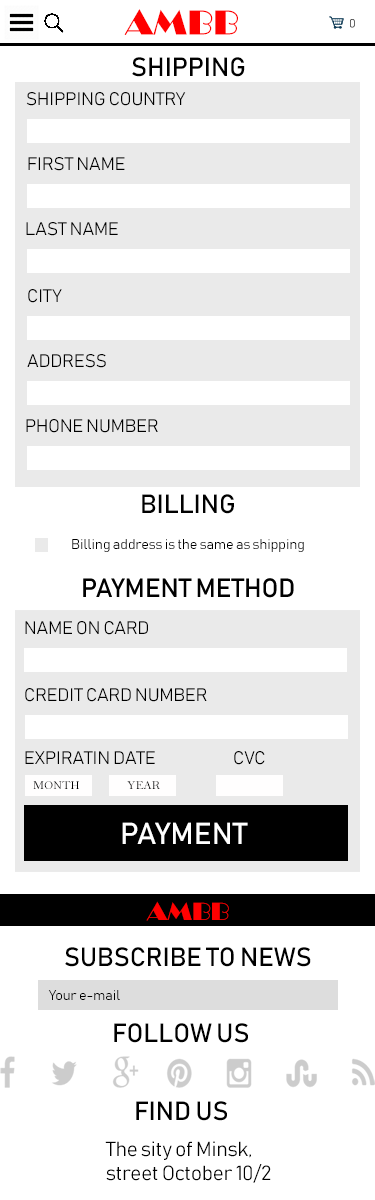
<style>
.page{position:relative;width:375px;height:1200px;background:#ffffff}
.page>*{position:absolute;margin:0}
.t1{font:36px "Broadway";color:#ff0000}
.t2{font:12px "Bahnschrift"}
.t3{font:26px "Bahnschrift";color:#000000}
.t4{font:18px "Bahnschrift";color:#000000}
.t5{font:14px "Bahnschrift";color:#000000}
.t6{font:12px "BellMT";color:#000000}
.t7{font:30px "Bahnschrift";color:#ffffff}
.t8{font:26px "Broadway";color:#ff0000}
.t9{font:20px "Bahnschrift";color:#000000}
</style>
<div class="page">
<p class="t1" style="left:124px;top:9px;width:114px;height:26px">AMBB</p>
<p class="t2" style="left:350px;top:19px;width:5px;height:9px">0</p>
<p class="t3" style="left:132px;top:57px;width:113px;height:20px">SHIPPING</p>
<p class="t4" style="left:26px;top:92px;width:160px;height:14px">SHIPPING COUNTRY</p>
<p class="t4" style="left:28px;top:157px;width:97px;height:14px">FIRST NAME</p>
<p class="t4" style="left:26px;top:222px;width:92px;height:14px">LAST NAME</p>
<p class="t4" style="left:28px;top:289px;width:34px;height:14px">CITY</p>
<p class="t4" style="left:27px;top:354px;width:79px;height:14px">ADDRESS</p>
<p class="t4" style="left:26px;top:419px;width:132px;height:14px">PHONE NUMBER</p>
<p class="t3" style="left:142px;top:494px;width:92px;height:20px">BILLING</p>
<p class="t5" style="left:72px;top:539px;width:232px;height:13px">Billing address is the same as shipping</p>
<p class="t4" style="left:25px;top:621px;width:123px;height:14px">NAME ON CARD</p>
<p class="t4" style="left:25px;top:688px;width:182px;height:14px">CREDIT CARD NUMBER</p>
<p class="t4" style="left:25px;top:751px;width:130px;height:13px">EXPIRATIN DATE</p>
<p class="t4" style="left:234px;top:751px;width:31px;height:14px">CVC</p>
<p class="t6" style="left:33px;top:781px;width:46px;height:8px">MONTH</p>
<p class="t6" style="left:127px;top:781px;width:33px;height:8px">YEAR</p>
<p class="t7" style="left:122px;top:822px;width:126px;height:22px">PAYMENT</p>
<p class="t8" style="left:146px;top:901px;width:83px;height:20px">AMBB</p>
<p class="t3" style="left:65px;top:947px;width:246px;height:20px">SUBSCRIBE TO NEWS</p>
<p class="t5" style="left:48px;top:990px;width:72px;height:10px">Your e-mail</p>
<p class="t3" style="left:114px;top:1023px;width:134px;height:20px">FOLLOW US</p>
<p class="t3" style="left:136px;top:1101px;width:91px;height:20px">FIND US</p>
<p class="t9" style="left:105px;top:1141px;width:166px;height:42px">The sity of Minsk,<br>street October 10/2</p>
</div>
